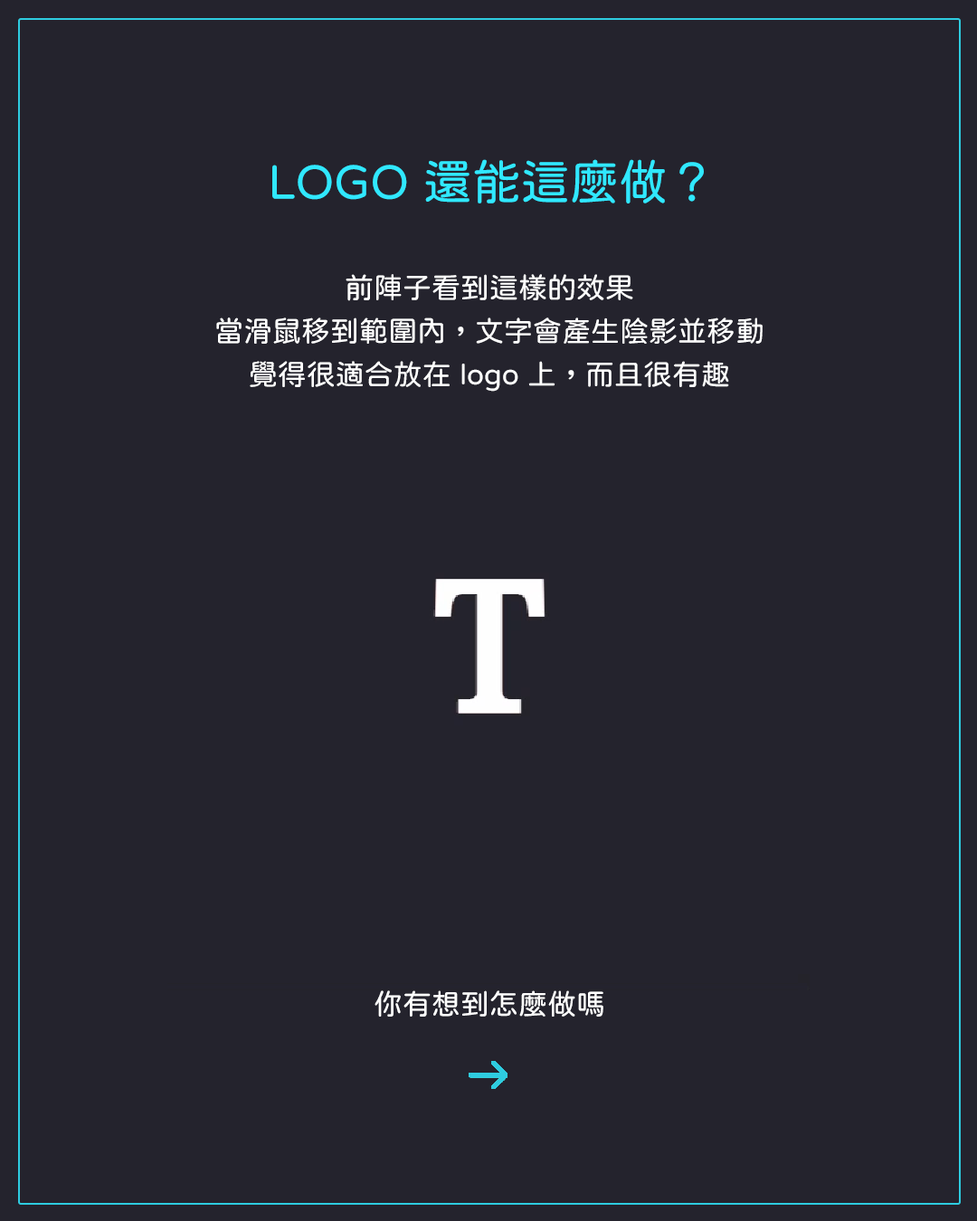
<style>
.page{position:relative;width:977px;height:1221px;background:#24232d}
.page>*{position:absolute;margin:0}
.t1{font:48.8px "jf-openhuninn-1.1";color:#30e8ff}
.t2{font:28.9px/43.4px "jf-openhuninn-1.1";color:#ffffff}
.t3{font:28.9px "jf-openhuninn-1.1";color:#ffffff}
</style>
<div class="page">
<p class="t1" style="left:272px;top:159px;width:432px;height:44px">LOGO 還能這麼做？</p>
<p class="t2" style="left:216px;top:274px;width:546px;height:118px;text-align:center">前陣子看到這樣的效果<br>當滑鼠移到範圍內，文字會產生陰影並移動<br>覺得很適合放在 logo 上，而且很有趣</p>
<p class="t3" style="left:374px;top:990px;width:229px;height:26px">你有想到怎麼做嗎</p>
</div>
